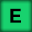
<style>
.page{position:relative;width:32px;height:32px;background:#18d26e}
.page>*{position:absolute;margin:0}
.t1{font:20px "Montserrat-Bold";color:#000000}
</style>
<div class="page">
<p class="t1" style="left:10px;top:8px;width:11px;height:15px">E</p>
</div>
